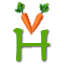
<style>
.page{position:relative;width:64px;height:64px;background:#ffffff}
.page>*{position:absolute;margin:0}
.t1{font:57px "Herculanum";color:#5aa806;scale:1.29 1}
</style>
<div class="page">
<p class="t1" style="left:13px;top:28px;width:37px;height:33px">H</p>
</div>
